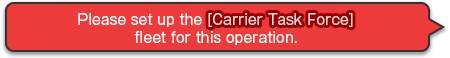
<style>
.page{position:relative;width:450px;height:58px;background:#ed3b3b}
.page>*{position:absolute;margin:0}
.t1{font:14px/18px "GothicMB101Pro-Regular";color:#ffffff}
.t2{font:14px/18px "GothicMB101Pro-Regular";color:#ffd3d3}
</style>
<div class="page">
<p class="t1" style="left:78px;top:13px;width:275px;height:32px;text-align:center">Please set up the <span class="t2">[Carrier Task Force]<br></span>fleet for this operation.</p>
<p class="t2" style="left:78px;top:13px;width:275px;height:32px;text-align:center"><span class="t1">Please set up the </span>[Carrier Task Force]<br><span class="t1">for this operation.</span></p>
</div>
